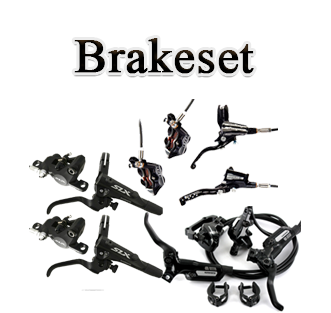
<style>
.page{position:relative;width:331px;height:313px;background:#ffffff}
.page>*{position:absolute;margin:0}
.t1{font:48px "TimesNewRomanPSMT";letter-spacing:0.005em;color:#000000;font-weight:bold}
</style>
<div class="page">
<p class="t1" style="left:74px;top:38px;width:180px;height:36px">Brakeset</p>
</div>
